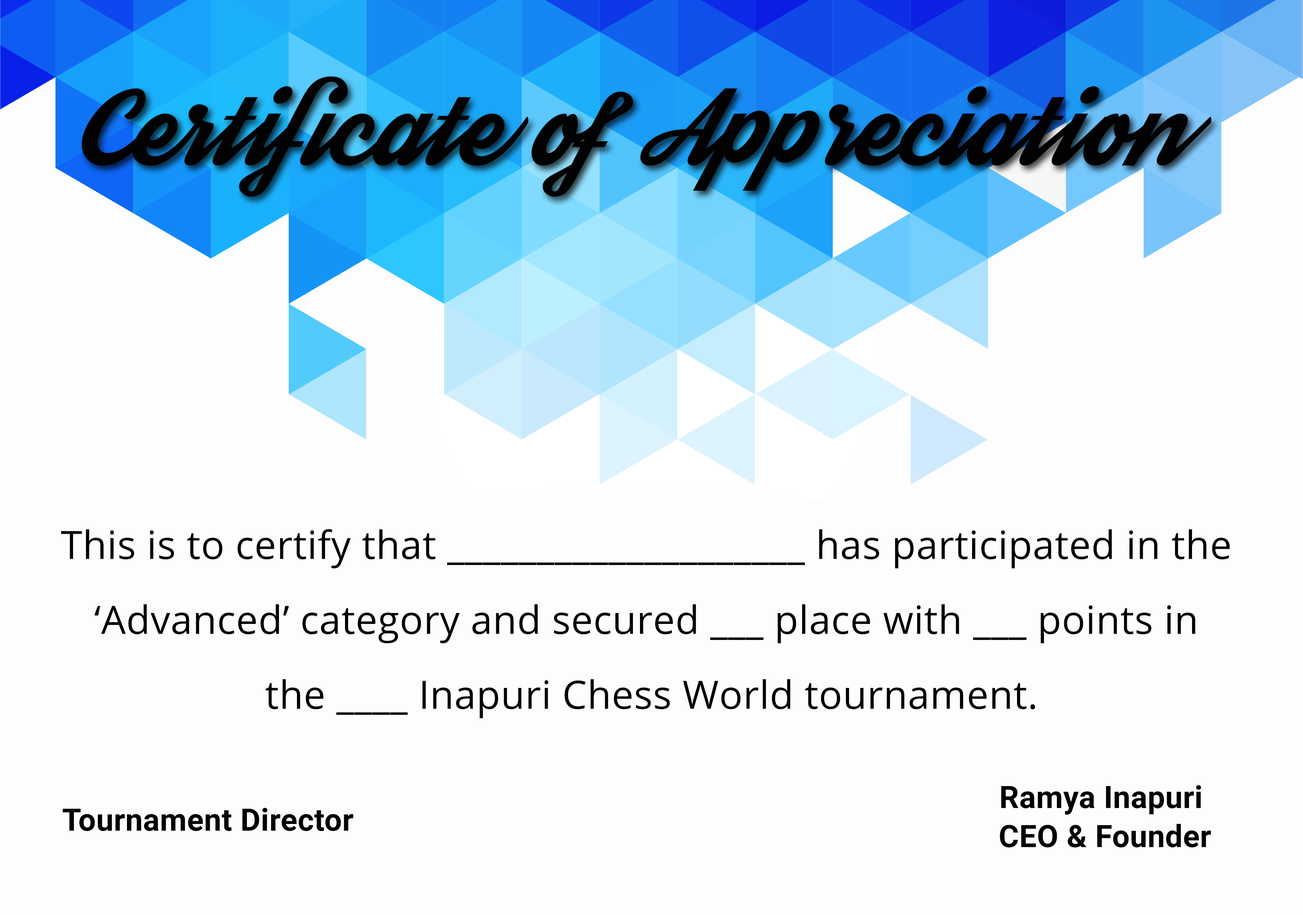
<style>
.page{position:relative;width:1303px;height:915px;background:#fdfdfd}
.page>*{position:absolute;margin:0}
.t1{font:78.2px "Streetwear";letter-spacing:0.01em;color:#020202}
.t2{font:39.1px/74.9px "OpenSans";letter-spacing:0.01em;color:#020202}
.t3{font:30.9px/39.1px "Roboto-Bold";letter-spacing:0.01em;color:#020202}
.t4{font:30.9px "Roboto-Bold";letter-spacing:0.01em;color:#020202}
</style>
<div class="page">
<p class="t1" style="left:82px;top:76px;width:1130px;height:121px">Certificate of Appreciation</p>
<p class="t2" style="left:61px;top:529px;width:1169px;height:190px;text-align:center">This is to certify that ____________________ has participated in the <br>‘Advanced’ category and secured ___ place with ___ points in <br>the ____ Inapuri Chess World tournament.</p>
<p class="t3" style="left:1000px;top:785px;width:211px;height:62px;text-align:center">Ramya Inapuri<br> CEO &amp; Founder</p>
<p class="t4" style="left:63px;top:808px;width:290px;height:23px">Tournament Director</p>
</div>
